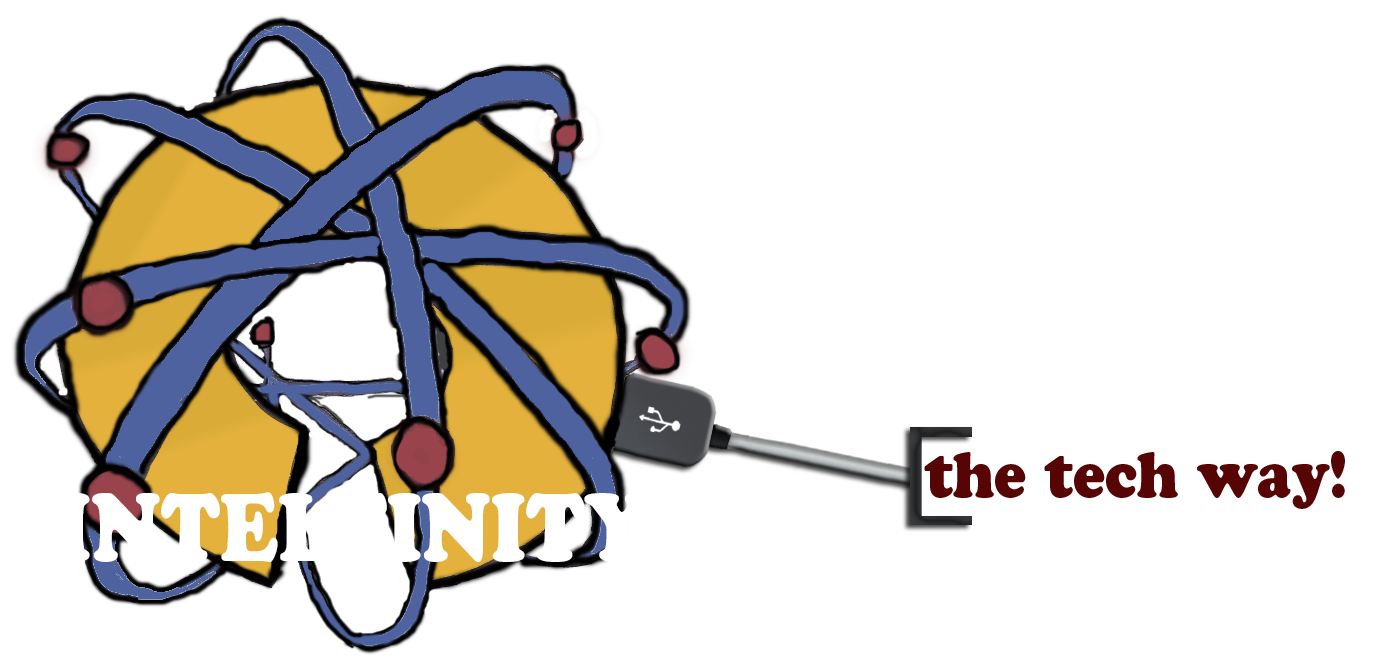
<style>
.page{position:relative;width:1400px;height:672px;background:#ffffff}
.page>*{position:absolute;margin:0}
.t1{font:64.5px "CooperBlackStd";color:#570404;scale:0.9 1}
.t2{font:95.8px "CooperBlackStd";color:#ffffff;scale:0.83 1}
</style>
<div class="page">
<p class="t1" style="left:924px;top:451px;width:421px;height:58px">the tech way!</p>
<p class="t2" style="left:57px;top:492px;width:593px;height:70px">INTELFINITY</p>
</div>
